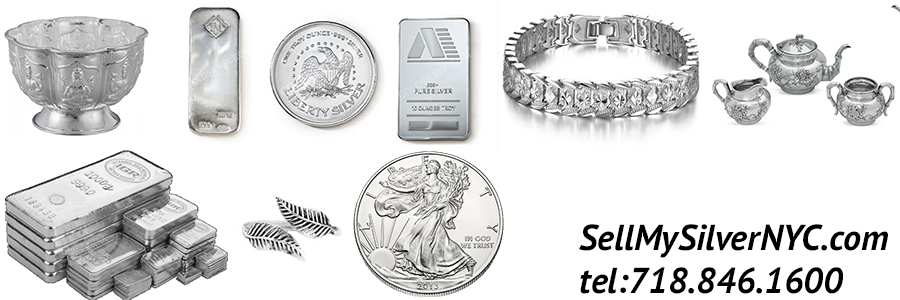
<style>
.page{position:relative;width:900px;height:300px;background:#ffffff}
.page>*{position:absolute;margin:0}
.t1{font:36px "PTSans-BoldItalic";color:#000000}
</style>
<div class="page">
<p class="t1" style="left:579px;top:224px;width:309px;height:70px">SellMySilverNYC.com<br>tel:718.846.1600</p>
</div>
